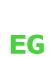
<style>
.page{position:relative;width:55px;height:57px;background:#ffffff}
.page>*{position:absolute;margin:0}
.t1{font:25px "DejaVuSansMono-Bold";letter-spacing:-0.075em;color:#49d33d;font-weight:bold;scale:1.25 1}
</style>
<div class="page">
<p class="t1" style="left:10px;top:34px;width:34px;height:20px">EG</p>
</div>
